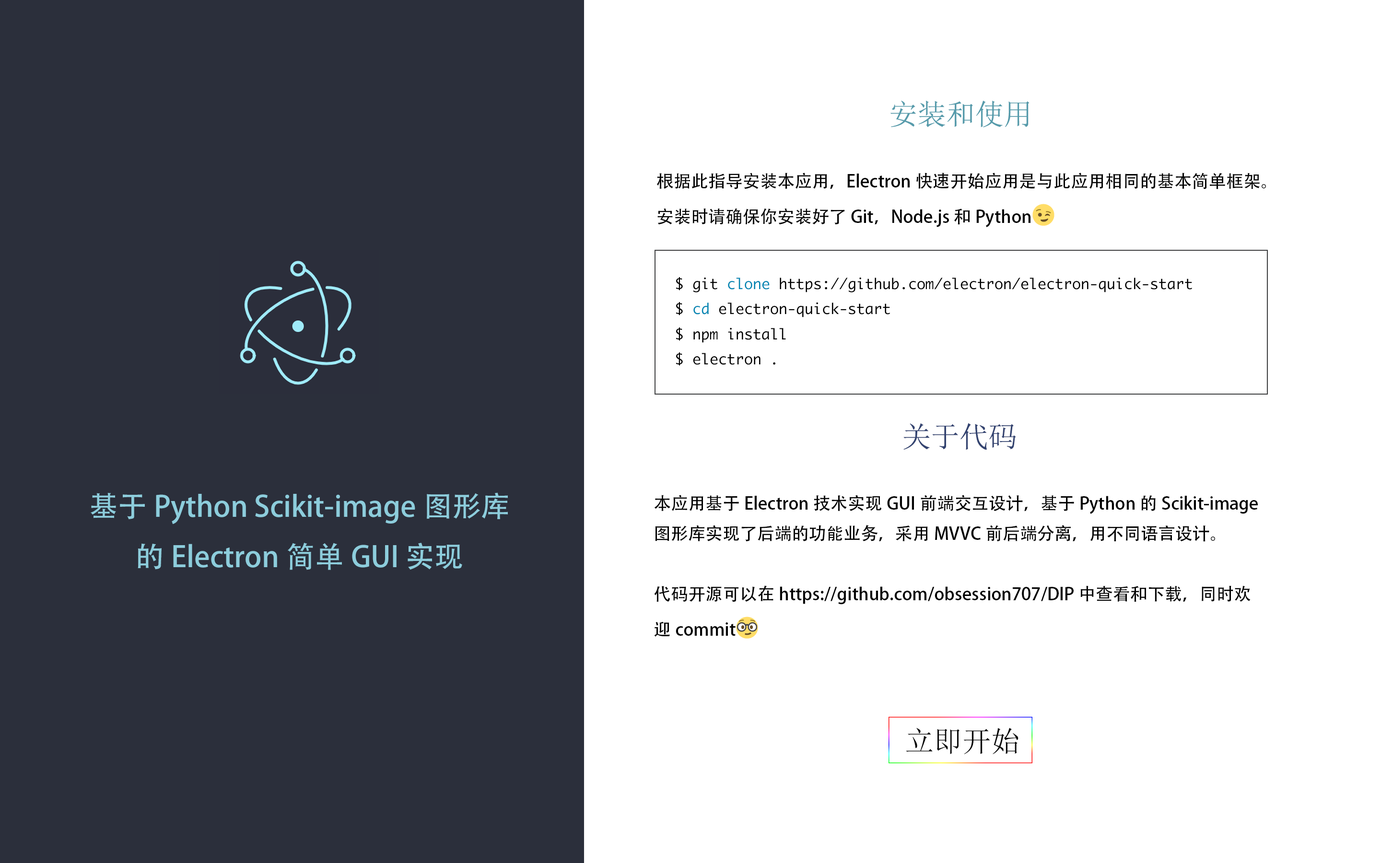
<style>
.page{position:relative;width:1381px;height:863px;background:#ffffff}
.page>*{position:absolute;margin:0}
.t1{font:28.8px "SimSun";color:#569bab}
.t2{font:17.3px "AdobeHeitiStd-Regular";color:#010101}
.t3{font:23px "EmojiOneColor";color:#010101}
.t4{font:14.4px "Monaco";color:#000000}
.t5{font:14.4px "Monaco";color:#0086b3}
.t6{font:28.8px "SimSun";color:#334370}
.t7{font:28.8px "AdobeHeitiStd-Regular";color:#8dcddc}
.t8{font:28.8px "SimSun";color:#070707}
</style>
<div class="page">
<p class="t1" style="left:890px;top:101px;width:140px;height:27px">安装和使用</p>
<p class="t2" style="left:657px;top:173px;width:609px;height:54px">根据此指导安装本应用，Electron快速开始应用是与此应用相同的基本简单框架。<br>安装时请确保你安装好了Git，Node.js和Python<span class="t3">😉</span></p>
<p class="t4" style="left:676px;top:277px;width:516px;height:89px">$ git <span class="t5">clone</span> https://github.com/electron/electron-quick-start<br>$ <span class="t5">cd</span> electron-quick-start<br>$ npm install<br>$ electron .</p>
<p class="t6" style="left:904px;top:423px;width:112px;height:27px">关于代码</p>
<p class="t7" style="left:90px;top:493px;width:418px;height:77px;text-align:center">基于Python Scikit-image图形库<br>的Electron简单GUI实现</p>
<p class="t2" style="left:654px;top:495px;width:604px;height:144px">本应用基于Electron技术实现GUI前端交互设计，基于Python的Scikit-image<br>图形库实现了后端的功能业务，采用MVVC前后端分离，用不同语言设计。<br><br>代码开源可以在https://github.com/obsession707/DIP中查看和下载，同时欢<br>迎commit<span class="t3">🤓</span></p>
<p class="t8" style="left:906px;top:728px;width:113px;height:26px">立即开始</p>
</div>
